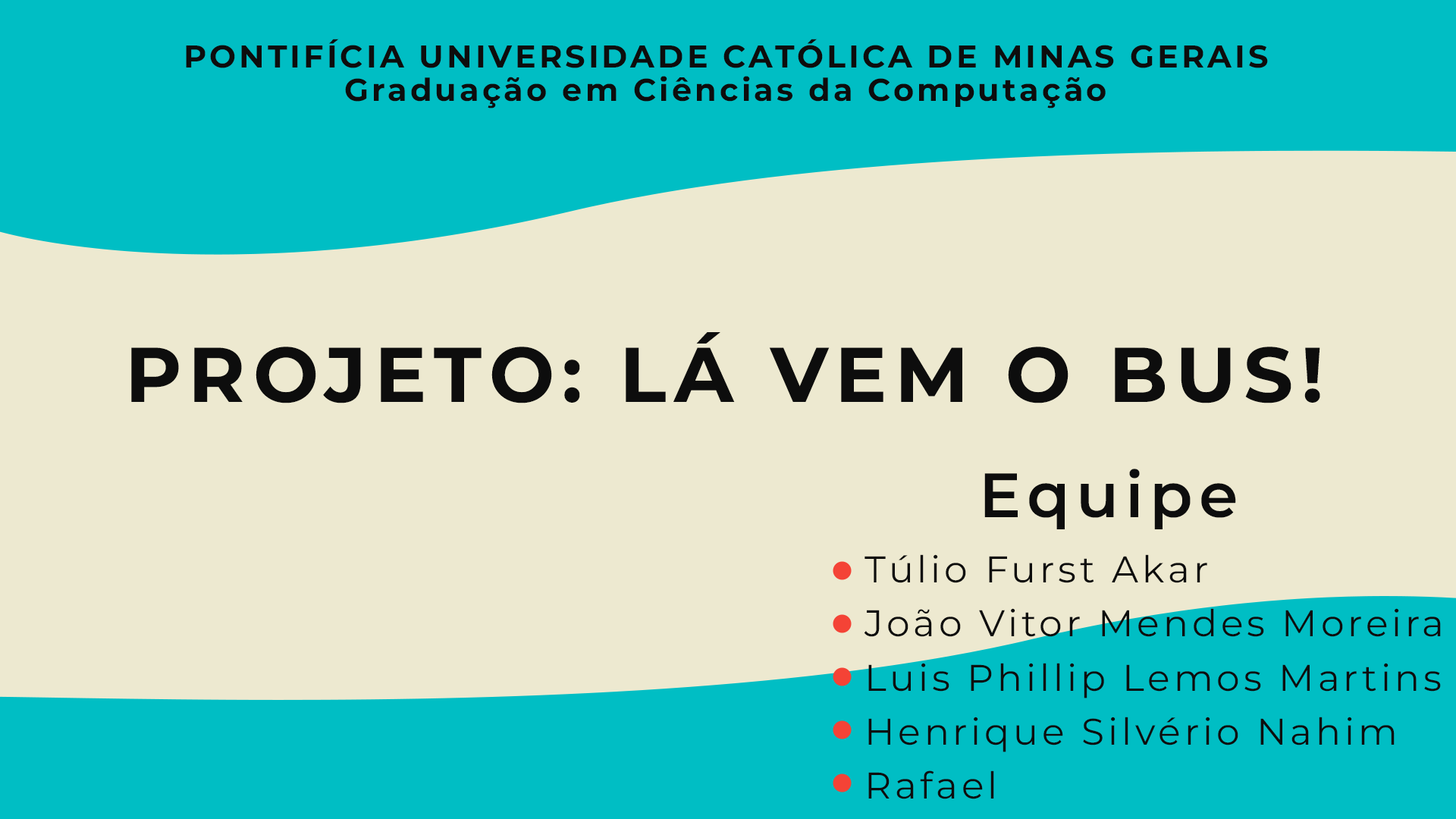
<style>
.page{position:relative;width:1456px;height:819px;background:#ede9d0}
.page>*{position:absolute;margin:0}
.t1{font:31.4px/33.9px "MontserratRoman-Bold";letter-spacing:0.1em;color:#0d0d0d}
.t2{font:77.3px "MontserratRoman-Bold";letter-spacing:0.1em;color:#0d0d0d}
.t3{font:62.6px "MontserratRoman-SemiBold";letter-spacing:0.1em;color:#0d0d0d}
.t4{font:37px/54.1px "MontserratRoman-Regular";letter-spacing:0.1em;color:#0d0d0d}
</style>
<div class="page">
<p class="t1" style="left:186px;top:39px;width:1082px;height:69px;text-align:center">PONTIFÍCIA UNIVERSIDADE CATÓLICA DE MINAS GERAIS<br>Graduação em Ciências da Computação</p>
<p class="t2" style="left:131px;top:332px;width:1189px;height:71px">PROJETO: LÁ VEM O BUS!</p>
<p class="t3" style="left:984px;top:469px;width:252px;height:60px">Equipe</p>
<p class="t4" style="left:864px;top:554px;width:577px;height:245px">Túlio Furst Akar<br>João Vitor Mendes Moreira<br>Luis Phillip Lemos Martins<br>Henrique Silvério Nahim<br>Rafael</p>
</div>
